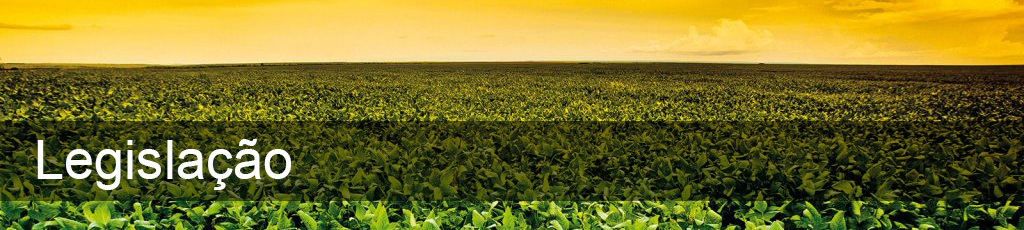
<style>
.page{position:relative;width:1024px;height:230px}
.page>*{position:absolute;margin:0}
.t1{font:54.1px "ArialMT";color:#fefefe}
</style>
<div class="page">
<p class="t1" style="left:37px;top:139px;width:254px;height:51px">Legislação</p>
</div>
